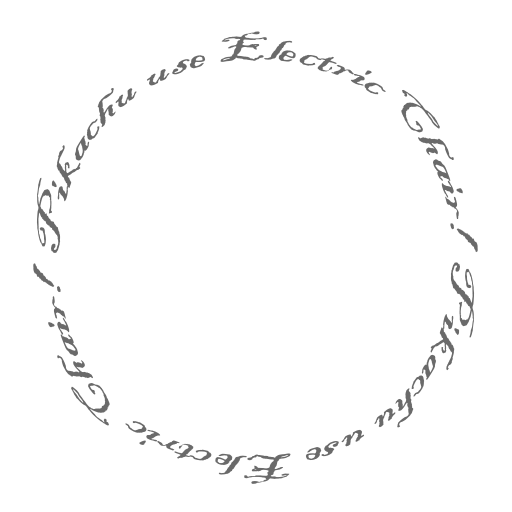
<style>
.page{position:relative;width:512px;height:512px;background:#ffffff}
.page>*{position:absolute;margin:0}
.t1{font:37.6px "BlackadderITC-Regular";color:#6a6a6a}
</style>
<div class="page">
<p class="t1" style="left:36px;top:31px;width:442px;height:222px">Pikachu use Electric Chair!</p>
<p class="t1" style="left:33px;top:262px;width:442px;height:222px;rotate:180deg">Pikachu use Electric Chair!</p>
</div>
